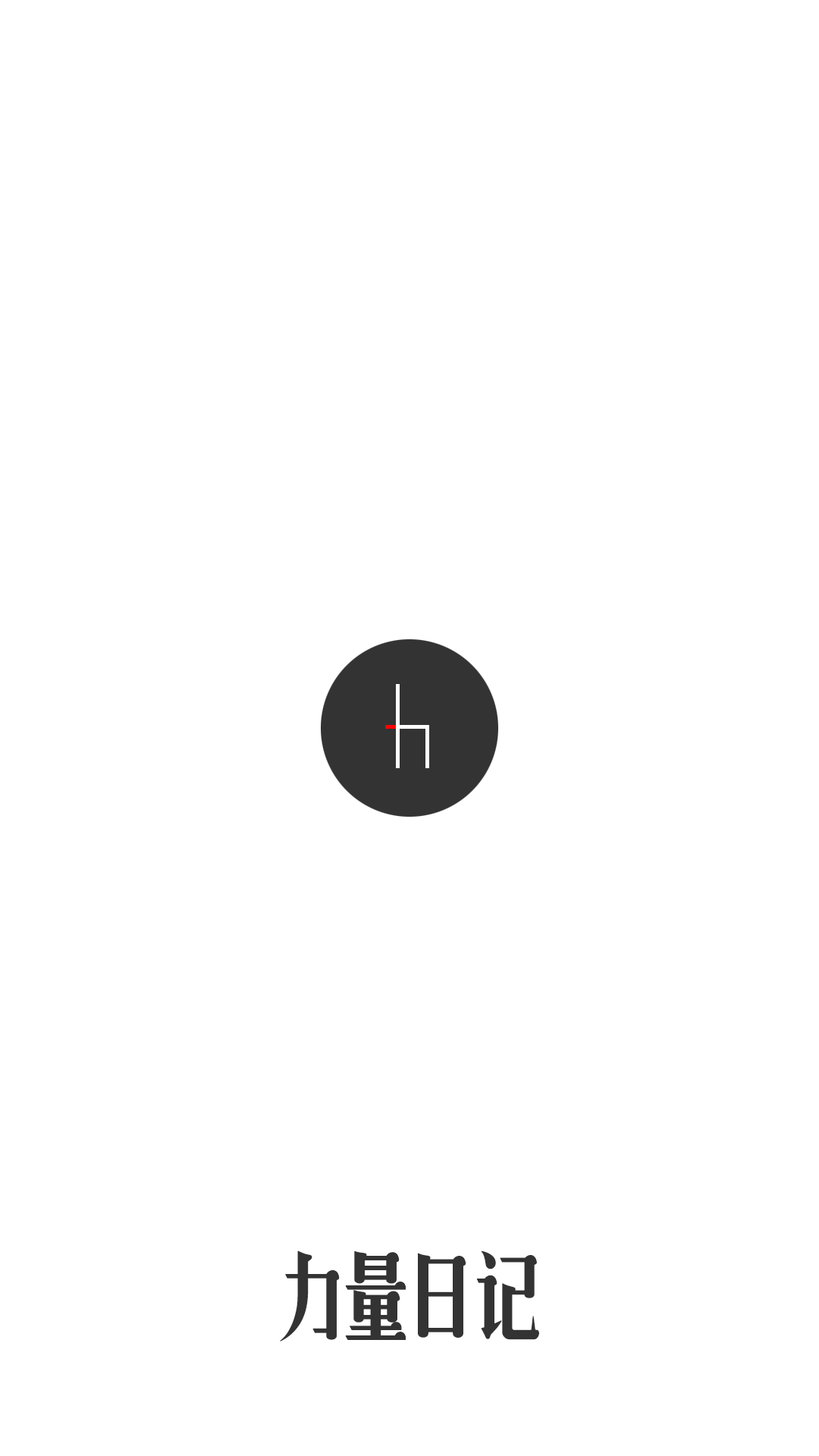
<style>
.page{position:relative;width:819px;height:1456px;background:#ffffff}
.page>*{position:absolute;margin:0}
.t1{font:91px "MF-YiShang-Noncommercial-Regular";color:#333333;font-weight:bold}
</style>
<div class="page">
<p class="t1" style="left:280px;top:1250px;width:259px;height:91px">力量日记</p>
</div>
